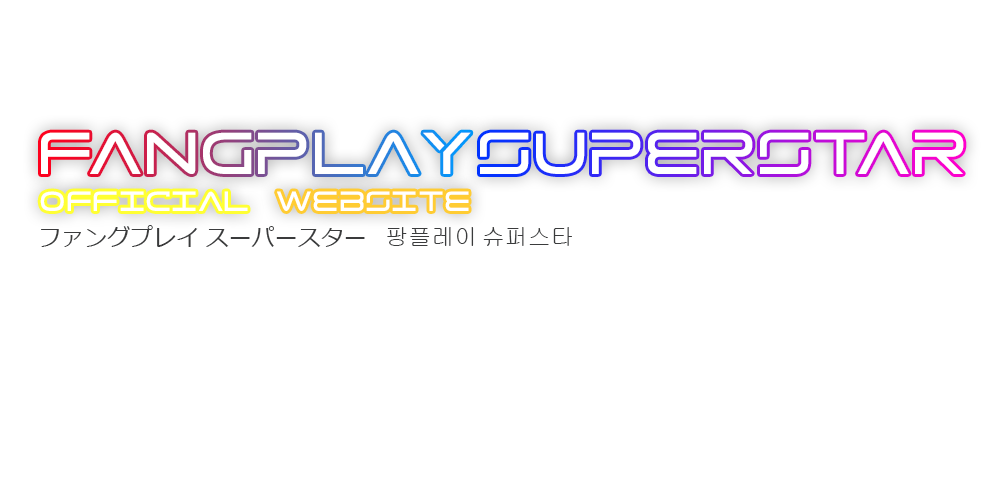
<style>
.page{position:relative;width:1000px;height:500px;background:#ffffff}
.page>*{position:absolute;margin:0}
.t1{font:68.1px "Tele-Marines";color:#ffffff}
.t2{font:32.1px "Tele-Marines";color:#ffffff}
.t3{font:23px "Meiryo";color:#3a3b3c}
.t4{font:23px "Gulim";color:#3a3b3c}
</style>
<div class="page">
<p class="t1" style="left:41px;top:132px;width:430px;height:42px">FANGPLAY</p>
<p class="t1" style="left:480px;top:132px;width:484px;height:42px">SUPERSTAR</p>
<p class="t2" style="left:40px;top:191px;width:208px;height:20px">OFFICIAL</p>
<p class="t2" style="left:277px;top:191px;width:192px;height:20px">WEBSITE</p>
<p class="t3" style="left:41px;top:225px;width:157px;height:22px">ファングプレイ</p>
<p class="t3" style="left:206px;top:226px;width:159px;height:21px">スーパースター</p>
<p class="t4" style="left:387px;top:227px;width:87px;height:19px">팡플레이</p>
<p class="t4" style="left:483px;top:227px;width:89px;height:19px">슈퍼스타</p>
</div>
